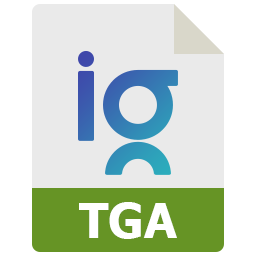
<style>
.page{position:relative;width:256px;height:256px;background:#eaeaea}
.page>*{position:absolute;margin:0}
.t1{font:48px "Tahoma-Bold";color:#ffffff}
</style>
<div class="page">
<p class="t1" style="left:79px;top:202px;width:98px;height:37px">TGA</p>
</div>
